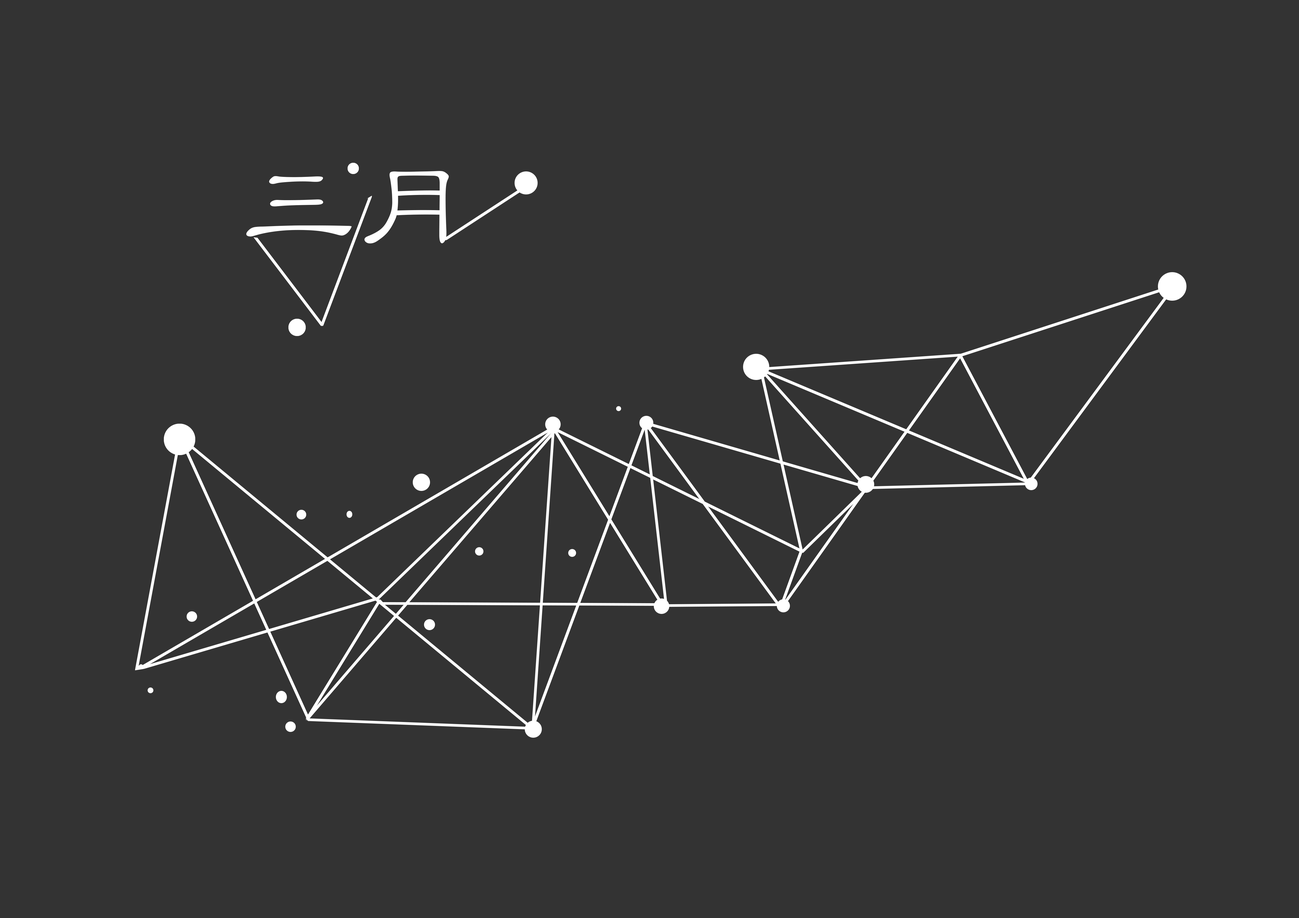
<style>
.page{position:relative;width:1299px;height:918px;background:#333333}
.page>*{position:absolute;margin:0}
.t1{font:115.9px "STLibianSC-Regular";letter-spacing:-0.06em;color:#ffffff;scale:1.08 1}
</style>
<div class="page">
<p class="t1" style="left:246px;top:171px;width:203px;height:73px">三月</p>
</div>
